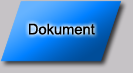
<style>
.page{position:relative;width:133px;height:73px;background:#c6c3c6}
.page>*{position:absolute;margin:0}
.t1{font:14.7px "ArialMT";color:#000000}
</style>
<div class="page">
<p class="t1" style="left:29px;top:23px;width:66px;height:12px">Dokument</p>
</div>
